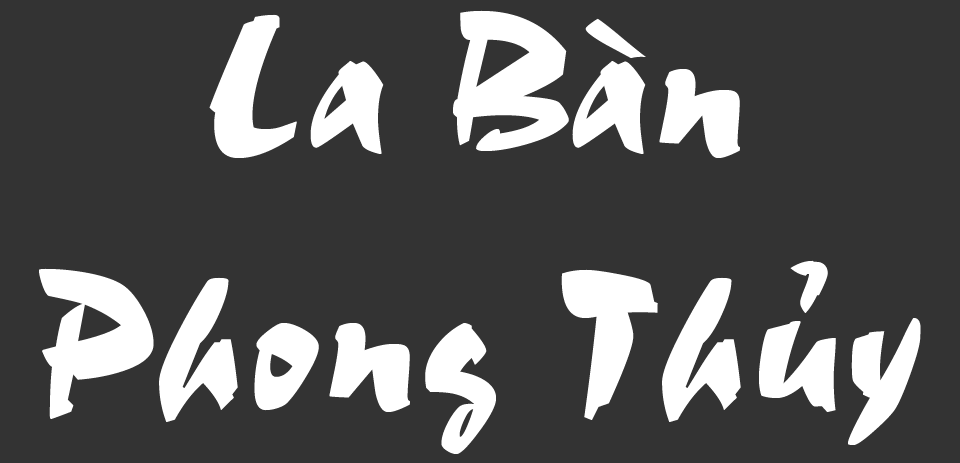
<style>
.page{position:relative;width:960px;height:463px;background:#333333}
.page>*{position:absolute;margin:0}
.t1{font:211.2px "UVNThangVu";color:#ffffff}
</style>
<div class="page">
<p class="t1" style="left:39px;top:10px;width:882px;height:444px;text-align:center">La Bàn<br>Phong Thủy</p>
</div>
